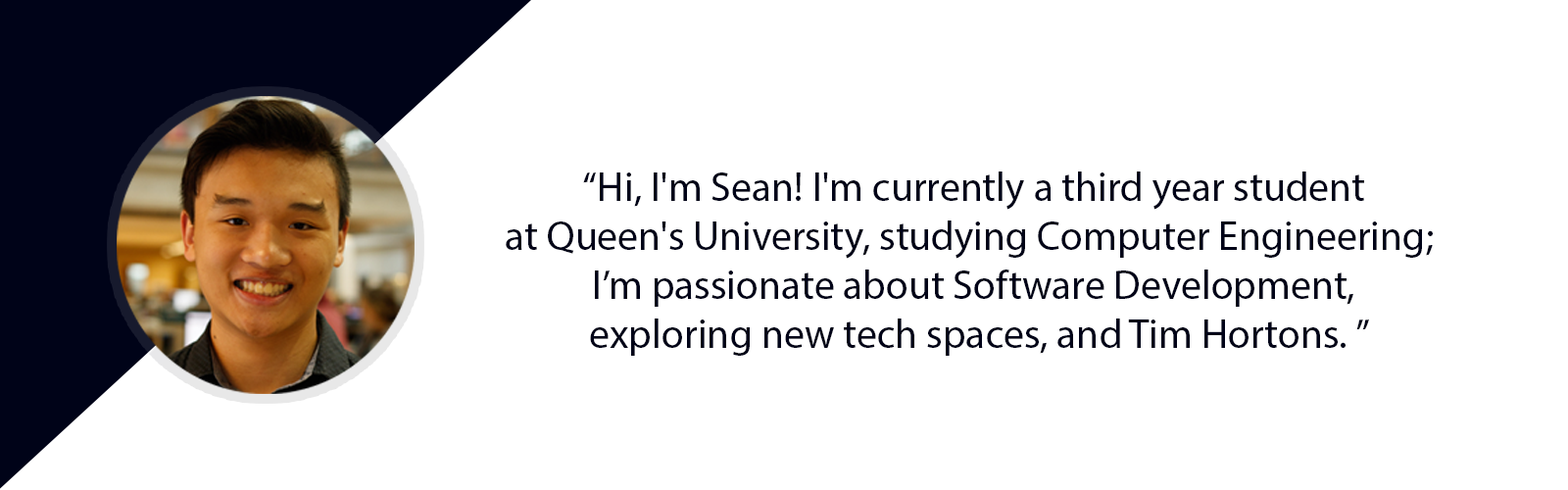
<style>
.page{position:relative;width:1568px;height:490px;background:#ffffff}
.page>*{position:absolute;margin:0}
.t1{font:40.8px "MyriadPro-Regular";color:#000318}
</style>
<div class="page">
<p class="t1" style="left:506px;top:172px;width:927px;height:184px;text-align:center">“Hi, I'm Sean! I'm currently a third year student <br>at Queen's University, studying Computer Engineering;  <br>I’m passionate about Software Development, <br>exploring new tech spaces, and Tim Hortons. ”</p>
</div>
